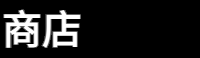
<style>
.page{position:relative;width:200px;height:58px;background:#000000}
.page>*{position:absolute;margin:0}
.t1{font:40px "WebPSD-18463539-0-Regular";color:#ffffff;font-weight:bold}
</style>
<div class="page">
<p class="t1" style="left:0px;top:0px;width:200px;height:58px">商店</p>
</div>
